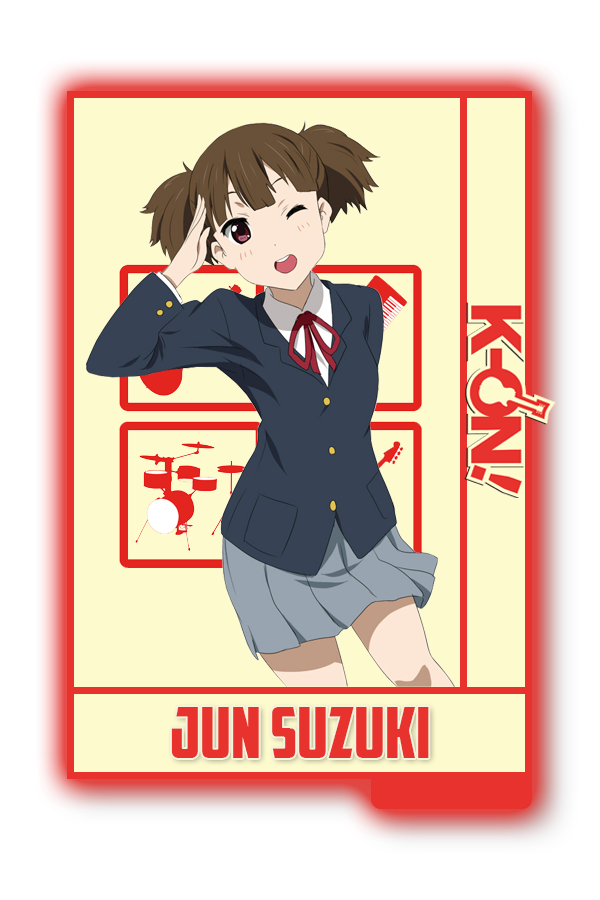
<style>
.page{position:relative;width:600px;height:900px;background:#fdfacd}
.page>*{position:absolute;margin:0}
.t1{font:70.8px "AmericanCaptain";color:#e7322e}
</style>
<div class="page">
<p class="t1" style="left:171px;top:707px;width:258px;height:51px">jun suzuki</p>
</div>
